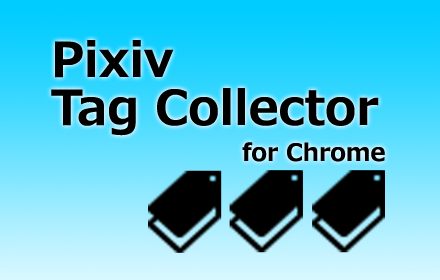
<style>
.page{position:relative;width:440px;height:280px}
.page>*{position:absolute;margin:0}
.t1{font:48px/36px "Meiryo-Bold";color:#000000}
.t2{font:48px/48px "Meiryo-Bold";color:#000000}
.t3{font:24px/36px "Meiryo-Bold";color:#000000}
</style>
<div class="page">
<p class="t1" style="left:51px;top:40px;width:334px;height:122px"><span class="t2">Pixiv<br></span>Tag Collector<br>            <span class="t3">for Chrome</span></p>
</div>
